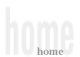
<style>
.page{position:relative;width:80px;height:57px;background:#ffffff}
.page>*{position:absolute;margin:0}
.t1{font:11.3px "Times-Bold";color:#999999}
</style>
<div class="page">
<p class="t1" style="left:37px;top:47px;width:27px;height:8px">home</p>
</div>
